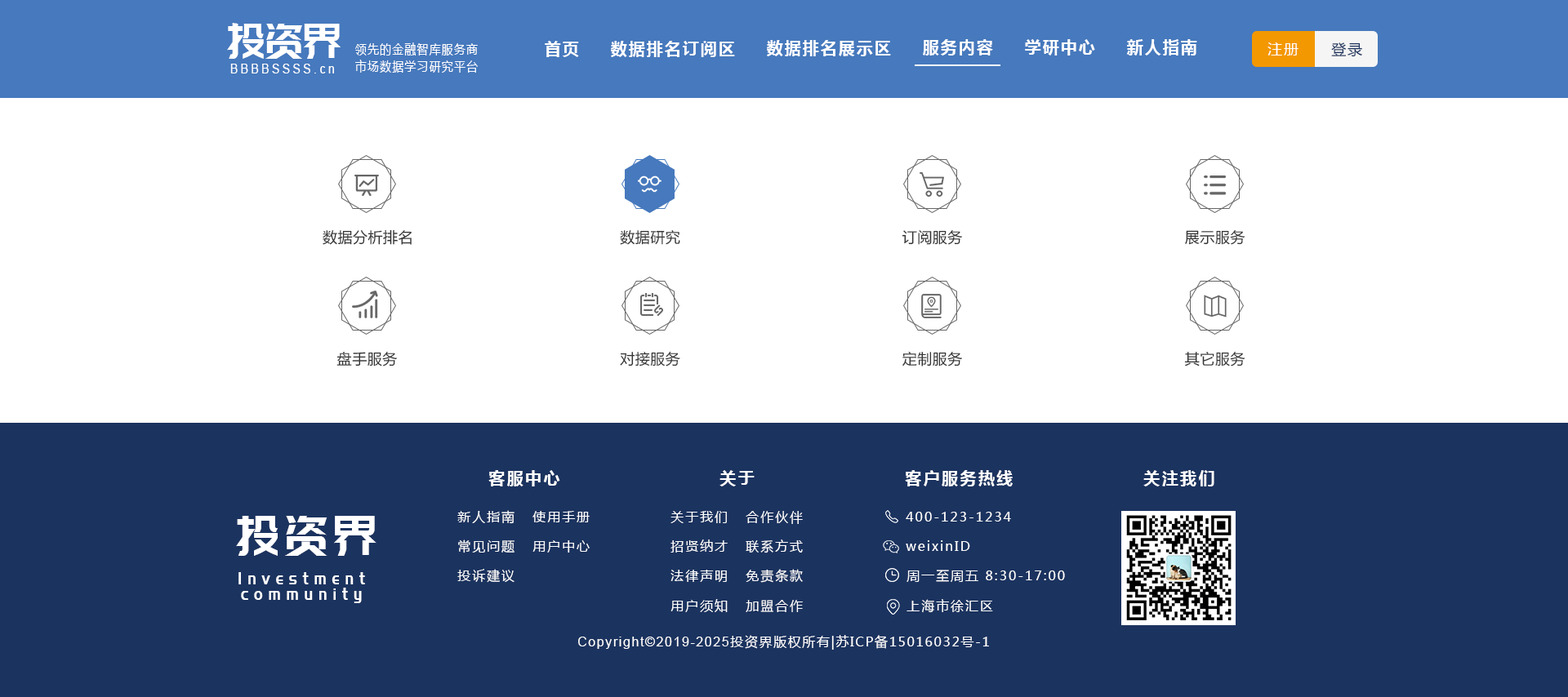
<style>
.page{position:relative;width:1568px;height:697px;background:#ffffff}
.page>*{position:absolute;margin:0}
.t1{font:48.6px "PangMenZhengDao";color:#ffffff;scale:0.86 1}
.t2{font:16.3px "MicrosoftYaHei-Bold";letter-spacing:0.1em;color:#ffffff}
.t3{font:13.1px "MicrosoftYaHei";letter-spacing:0.1em;color:#ffffff;scale:0.86 1}
.t4{font:14.7px "MicrosoftYaHei";letter-spacing:0.1em;color:#ffffff}
.t5{font:14.7px "MicrosoftYaHei";letter-spacing:0.1em;color:#1b335f}
.t6{font:13.1px "ArialMT";letter-spacing:0.26em;color:#ffffff;scale:0.86 1}
.t7{font:14.7px "MicrosoftYaHei";letter-spacing:0.03em;color:#333333}
.t8{font:16.3px "MicrosoftYaHei-Bold";letter-spacing:0.12em;color:#ffffff}
.t9{font:55.5px "PangMenZhengDao";letter-spacing:0.1em;color:#ffffff;scale:0.86 1}
.t10{font:13.1px "MicrosoftYaHei";letter-spacing:0.12em;color:#ffffff}
.t11{font:17.6px/15.4px "PangMenZhengDao";letter-spacing:0.36em;color:#ffffff;scale:0.86 1}
.t12{font:13.1px "MicrosoftYaHei";letter-spacing:0.1em;color:#ffffff}
.t13{font:13.1px "ArialMT";letter-spacing:0.1em;color:#ffffff}
</style>
<div class="page">
<p class="t1" style="left:227px;top:23px;width:114px;height:36px">投资界</p>
<p class="t2" style="left:545px;top:41px;width:34px;height:16px">首页</p>
<p class="t2" style="left:611px;top:41px;width:124px;height:16px">数据排名订阅区</p>
<p class="t2" style="left:767px;top:40px;width:124px;height:16px">数据排名展示区</p>
<p class="t2" style="left:923px;top:39px;width:70px;height:17px">服务内容</p>
<p class="t2" style="left:1025px;top:39px;width:70px;height:17px">学研中心</p>
<p class="t2" style="left:1126px;top:39px;width:71px;height:17px">新人指南</p>
<p class="t3" style="left:355px;top:42px;width:123px;height:14px">领先的金融智库服务商</p>
<p class="t4" style="left:1267px;top:42px;width:31px;height:14px">注册</p>
<p class="t5" style="left:1331px;top:42px;width:31px;height:15px">登录</p>
<p class="t6" style="left:230px;top:64px;width:104px;height:10px">BBBBSSSS.cn</p>
<p class="t3" style="left:355px;top:60px;width:123px;height:13px">市场数据学习研究平台</p>
<p class="t7" style="left:323px;top:229px;width:89px;height:16px">数据分析排名</p>
<p class="t7" style="left:620px;top:230px;width:60px;height:15px">数据研究</p>
<p class="t7" style="left:902px;top:229px;width:60px;height:16px">订阅服务</p>
<p class="t7" style="left:1185px;top:229px;width:60px;height:16px">展示服务</p>
<p class="t7" style="left:336px;top:351px;width:61px;height:16px">盘手服务</p>
<p class="t7" style="left:620px;top:351px;width:60px;height:16px">对接服务</p>
<p class="t7" style="left:902px;top:351px;width:60px;height:16px">定制服务</p>
<p class="t7" style="left:1184px;top:351px;width:61px;height:16px">其它服务</p>
<p class="t8" style="left:488px;top:470px;width:72px;height:17px">客服中心</p>
<p class="t8" style="left:719px;top:470px;width:36px;height:17px">关于</p>
<p class="t8" style="left:905px;top:470px;width:108px;height:17px">客户服务热线</p>
<p class="t8" style="left:1143px;top:470px;width:71px;height:17px">关注我们</p>
<p class="t9" style="left:236px;top:516px;width:140px;height:40px">投资界</p>
<p class="t10" style="left:457px;top:510px;width:57px;height:14px">新人指南</p>
<p class="t10" style="left:532px;top:511px;width:58px;height:12px">使用手册</p>
<p class="t10" style="left:670px;top:511px;width:57px;height:12px">关于我们</p>
<p class="t10" style="left:746px;top:511px;width:57px;height:13px">合作伙伴</p>
<p class="t10" style="left:906px;top:512px;width:105px;height:10px">400-123-1234</p>
<p class="t10" style="left:458px;top:540px;width:56px;height:14px">常见问题</p>
<p class="t10" style="left:532px;top:541px;width:58px;height:12px">用户中心</p>
<p class="t10" style="left:670px;top:540px;width:58px;height:13px">招贤纳才</p>
<p class="t10" style="left:746px;top:540px;width:57px;height:14px">联系方式</p>
<p class="t10" style="left:906px;top:541px;width:64px;height:10px">weixinID</p>
<p class="t10" style="left:457px;top:569px;width:57px;height:14px">投诉建议</p>
<p class="t10" style="left:746px;top:569px;width:57px;height:14px">免责条款</p>
<p class="t11" style="left:238px;top:572px;width:127px;height:32px;text-align:center">Investment<br>community</p>
<p class="t10" style="left:670px;top:570px;width:57px;height:12px">法律声明</p>
<p class="t10" style="left:906px;top:570px;width:159px;height:12px">周一至周五 8:30-17:00</p>
<p class="t10" style="left:670px;top:599px;width:58px;height:13px">用户须知</p>
<p class="t10" style="left:746px;top:600px;width:57px;height:12px">加盟合作</p>
<p class="t10" style="left:906px;top:599px;width:87px;height:14px">上海市徐汇区</p>
<p class="t12" style="left:578px;top:635px;width:411px;height:15px"><span class="t13">Copyright©2019-2025</span>投资界版权所有|苏ICP备15016032号-1</p>
</div>
